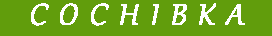
<style>
.page{position:relative;width:272px;height:36px;background:#619d0c}
.page>*{position:absolute;margin:0}
.t1{font:36px "Gabriola";letter-spacing:0.3em;color:#ffffff;font-weight:bold;font-style:italic}
</style>
<div class="page">
<p class="t1" style="left:31px;top:3px;width:214px;height:23px">СОСНІВКА</p>
</div>
